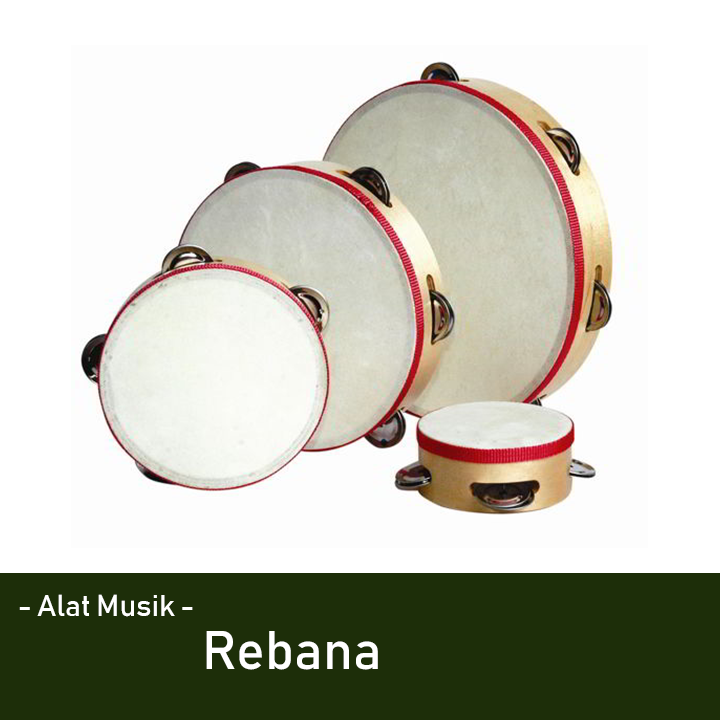
<style>
.page{position:relative;width:720px;height:720px;background:#ffffff}
.page>*{position:absolute;margin:0}
.t1{font:30px "Bahnschrift";color:#ffffff}
.t2{font:53.6px "Bahnschrift";color:#ffffff}
</style>
<div class="page">
<p class="t1" style="left:19px;top:594px;width:174px;height:23px">- Alat Musik -</p>
<p class="t2" style="left:206px;top:631px;width:172px;height:39px">Rebana</p>
</div>
